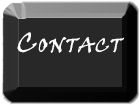
<style>
.page{position:relative;width:140px;height:105px;background:#282828}
.page>*{position:absolute;margin:0}
.t1{font:48px "VinerHandITC";letter-spacing:0.05em;color:#ffffff;font-variant:small-caps}
</style>
<div class="page">
<p class="t1" style="left:17px;top:32px;width:107px;height:21px">Contact</p>
</div>
